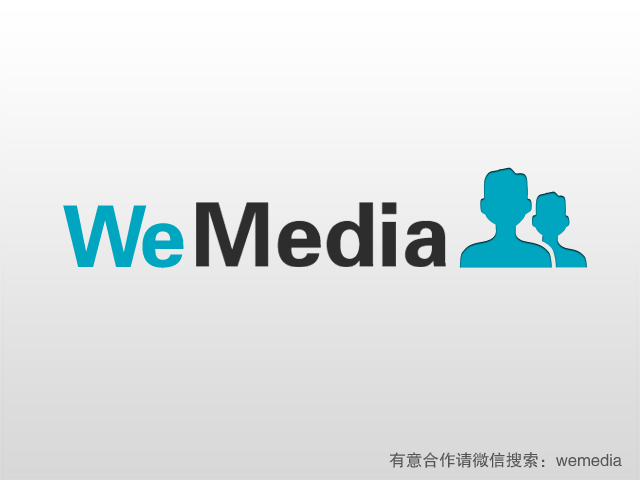
<style>
.page{position:relative;width:640px;height:480px}
.page>*{position:absolute;margin:0}
.t1{font:84.9px "FZDHTK--GBK1-0";letter-spacing:-0.1em;color:#00a6bf}
.t2{font:16.7px "FZHTK--GBK1-0";color:#555555}
</style>
<div class="page">
<p class="t1" style="left:63px;top:205px;width:121px;height:63px">We</p>
<p class="t2" style="left:389px;top:452px;width:233px;height:16px">有意合作请微信搜索：wemedia</p>
</div>
